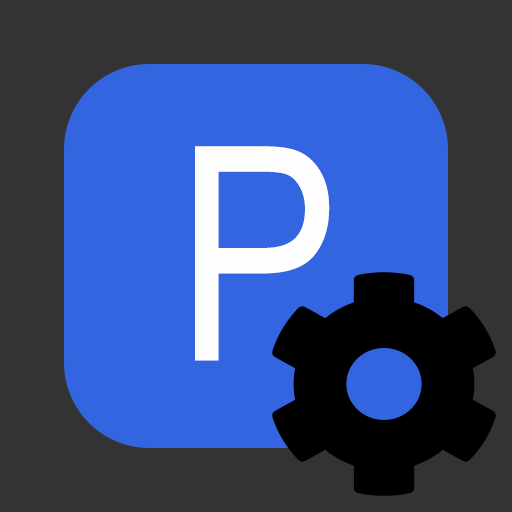
<style>
.page{position:relative;width:512px;height:512px;background:#333333}
.page>*{position:absolute;margin:0}
.t1{font:298.8px "ArialNarrow";color:#fefefe}
</style>
<div class="page">
<p class="t1" style="left:195px;top:146px;width:135px;height:215px">P</p>
</div>
